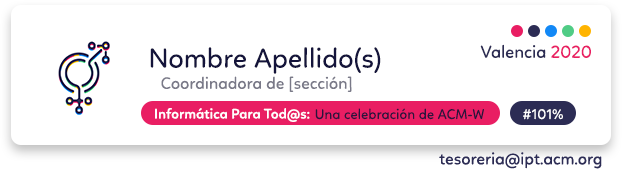
<style>
.page{position:relative;width:622px;height:169px;background:#ffffff}
.page>*{position:absolute;margin:0}
.t1{font:28.1px "Linotte-Regular";color:#14143b}
.t2{font:17.7px "Linotte-Regular";color:#2c2c54}
.t3{font:17.7px "Linotte-Regular";color:#e91e63}
.t4{font:16.9px "Linotte-Regular";color:#797988}
.t5{font:14.3px "Linotte-SemiBold";color:#ffffff}
.t6{font:14.3px "Linotte-Regular";color:#14143b}
.t7{font:14.3px "Linotte-Regular";color:#ffffff}
.t8{font:16.9px "Linotte-Regular";color:#2c2c54}
</style>
<div class="page">
<p class="t1" style="left:150px;top:47px;width:231px;height:27px">Nombre Apellido(s)</p>
<p class="t2" style="left:480px;top:44px;width:66px;height:14px">Valencia</p>
<p class="t3" style="left:551px;top:45px;width:40px;height:13px">2020</p>
<p class="t4" style="left:161px;top:76px;width:191px;height:16px">Coordinadora de [sección]</p>
<p class="t5" style="left:155px;top:108px;width:155px;height:14px">Informática Para Tod@s:</p>
<p class="t6" style="left:315px;top:108px;width:169px;height:12px;opacity:0.95">Una celebración de ACM-W</p>
<p class="t7" style="left:523px;top:109px;width:40px;height:11px">#101%</p>
<p class="t8" style="left:439px;top:152px;width:163px;height:17px">tesoreria@ipt.acm.org</p>
</div>
